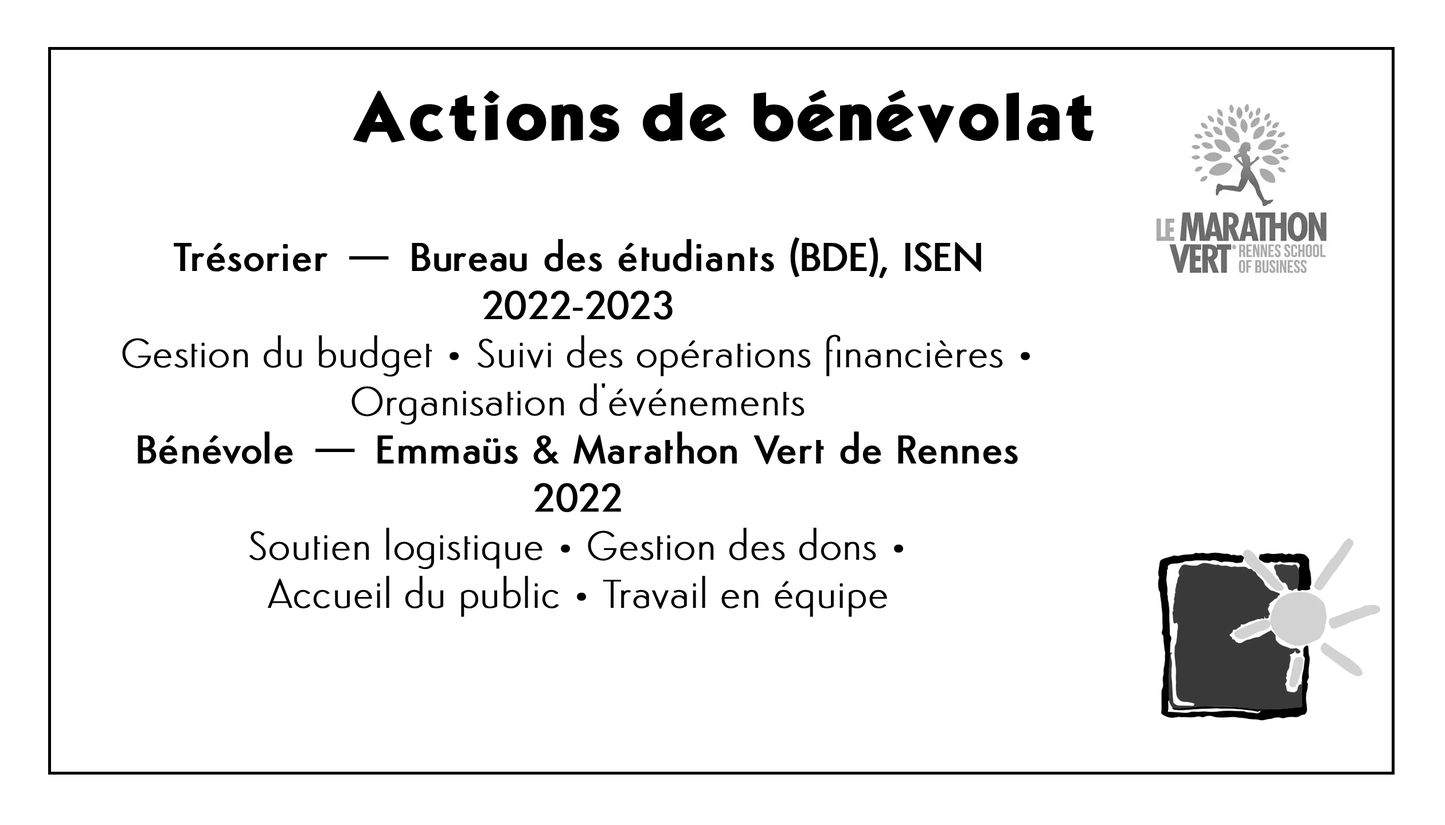
<style>
.page{position:relative;width:1445px;height:825px;background:#ffffff}
.page>*{position:absolute;margin:0}
.t1{font:57.3px "KabelBdNormal";color:#000000;font-weight:bold}
.t2{font:40.1px "Semplicita-Light";color:#000000;font-weight:bold}
.t3{font:40.1px "Semplicita-Medium";color:#000000;font-weight:bold}
</style>
<div class="page">
<p class="t1" style="left:353px;top:90px;width:741px;height:54px">Actions de bénévolat</p>
<p class="t2" style="left:122px;top:237px;width:908px;height:380px;text-align:center"><span class="t3">Trésorier — Bureau des étudiants (BDE), ISEN  <br>2022-2023</span><br>Gestion du budget • Suivi des opérations financières • Organisation d'événements<br><span class="t3">Bénévole — Emmaüs &amp; Marathon Vert de Rennes<br>2022</span><br>Soutien logistique • Gestion des dons • <br>Accueil du public • Travail en équipe</p>
</div>
